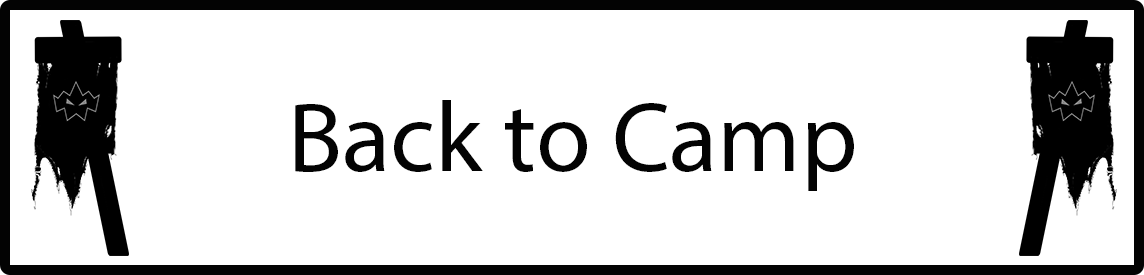
<style>
.page{position:relative;width:1144px;height:275px;background:#ffffff}
.page>*{position:absolute;margin:0}
.t1{font:100px "MyriadPro-Regular";color:#030303}
</style>
<div class="page">
<p class="t1" style="left:295px;top:100px;width:559px;height:91px">Back to Camp</p>
</div>
